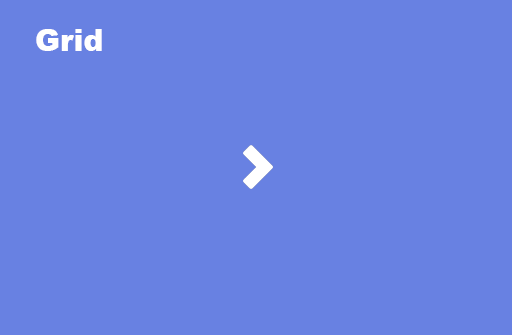
<style>
.page{position:relative;width:512px;height:335px;background:#6881e2}
.page>*{position:absolute;margin:0}
.t1{font:30px "Arial-Black";color:#ffffff}
</style>
<div class="page">
<p class="t1" style="left:36px;top:29px;width:66px;height:22px">Grid</p>
</div>
